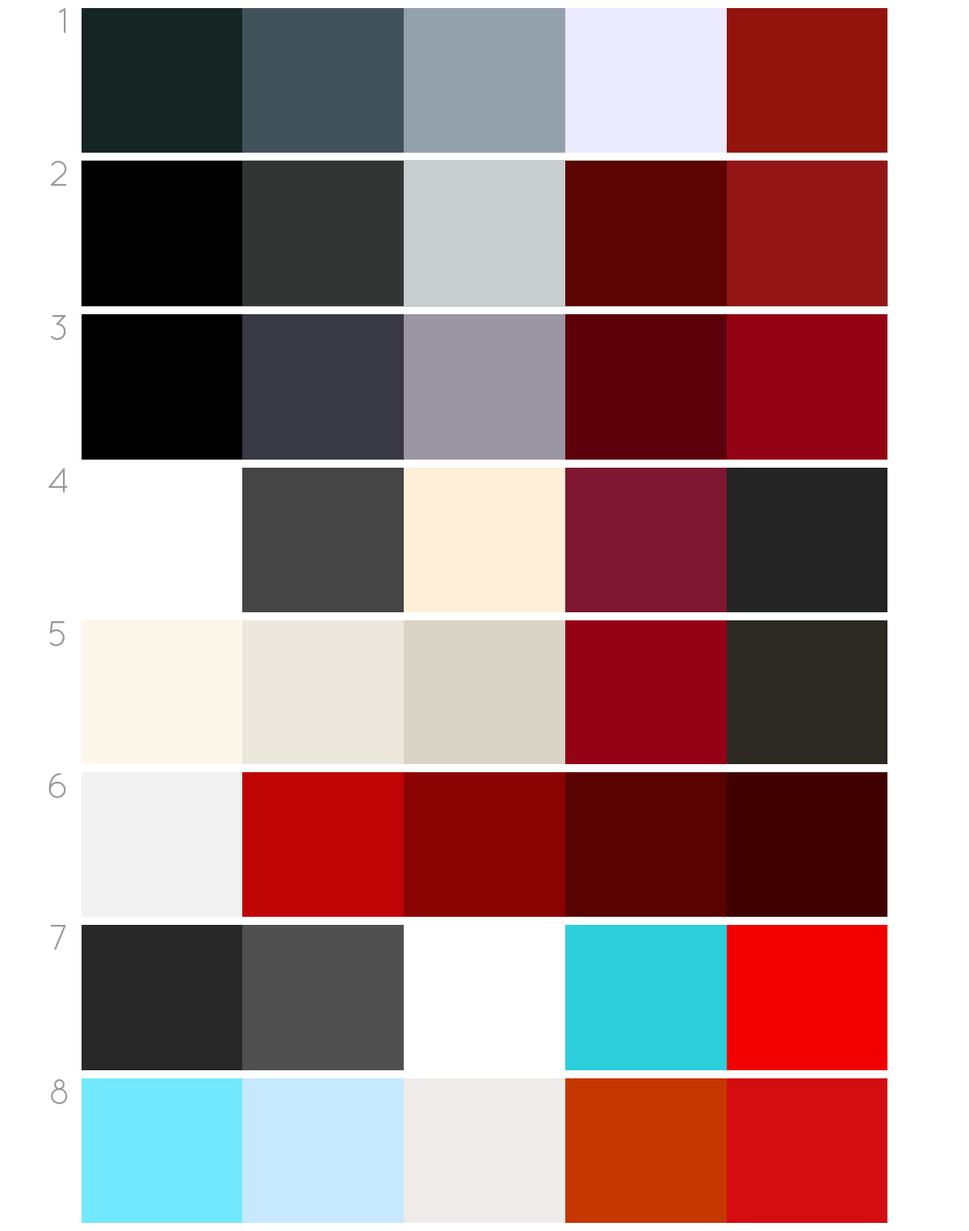
<style>
.page{position:relative;width:969px;height:1231px}
.page>*{position:absolute;margin:0}
.t1{font:35.5px "QuicksandBook-Regular";letter-spacing:-0.1em;color:#999999;text-transform:uppercase}
</style>
<div class="page">
<p class="t1" style="left:59px;top:8px;width:7px;height:25px">1</p>
<p class="t1" style="left:50px;top:161px;width:17px;height:25px">2</p>
<p class="t1" style="left:51px;top:315px;width:15px;height:25px">3</p>
<p class="t1" style="left:48px;top:468px;width:20px;height:25px">4</p>
<p class="t1" style="left:49px;top:621px;width:16px;height:25px">5</p>
<p class="t1" style="left:48px;top:773px;width:18px;height:25px">6</p>
<p class="t1" style="left:50px;top:925px;width:16px;height:25px">7</p>
<p class="t1" style="left:51px;top:1079px;width:17px;height:25px">8</p>
</div>
